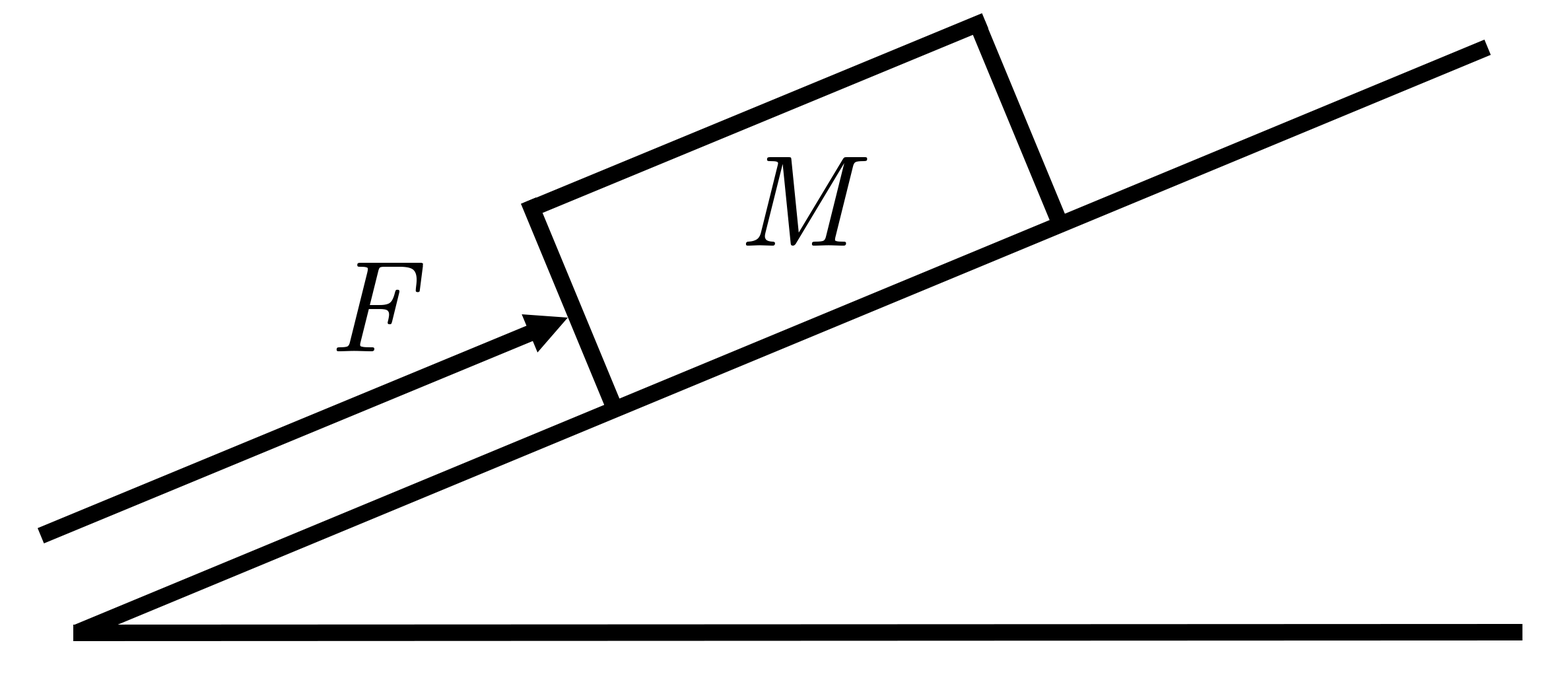
<style>
.page{position:relative;width:1568px;height:688px;background:#ffffff}
.page>*{position:absolute;margin:0}
.t1{font:129.4px "CMUSerif-Italic";color:#000000}
</style>
<div class="page">
<p class="t1" style="left:745px;top:157px;width:123px;height:89px">M</p>
<p class="t1" style="left:336px;top:263px;width:87px;height:88px">F</p>
</div>
